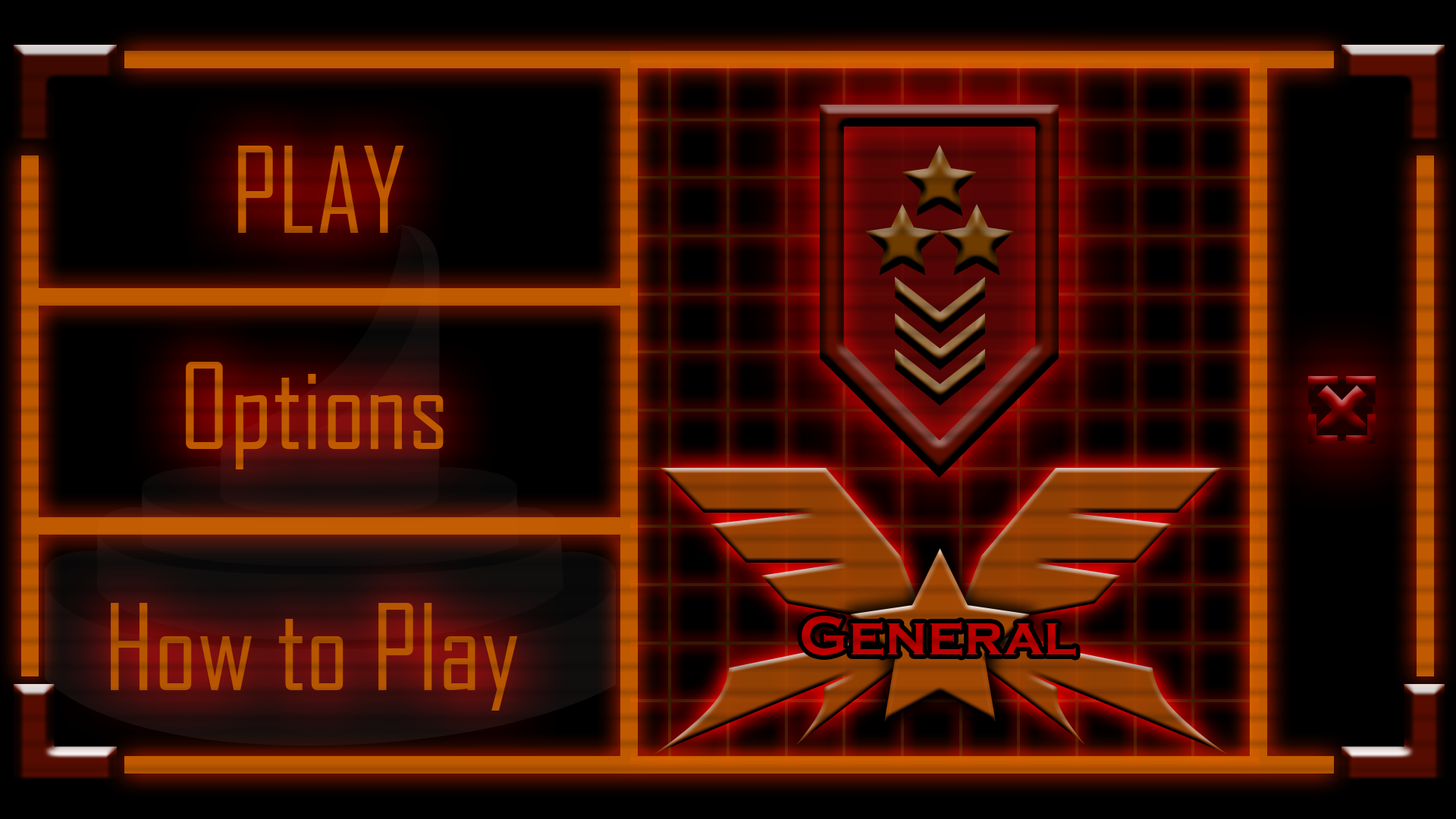
<style>
.page{position:relative;width:1456px;height:819px}
.page>*{position:absolute;margin:0}
.t1{font:113.8px "AgencyFB-Reg";color:#c05a00}
.t2{font:113.8px "AgencyFB-Reg";color:#b65600}
.t3{font:56.7px "CopperplateGothic-Bold";color:#bb0000}
</style>
<div class="page">
<p class="t1" style="left:238px;top:146px;width:166px;height:87px">PLAY</p>
<p class="t1" style="left:186px;top:362px;width:258px;height:107px">Options</p>
<p class="t2" style="left:111px;top:603px;width:407px;height:108px">How to Play</p>
<p class="t3" style="left:802px;top:616px;width:274px;height:40px">General</p>
</div>
